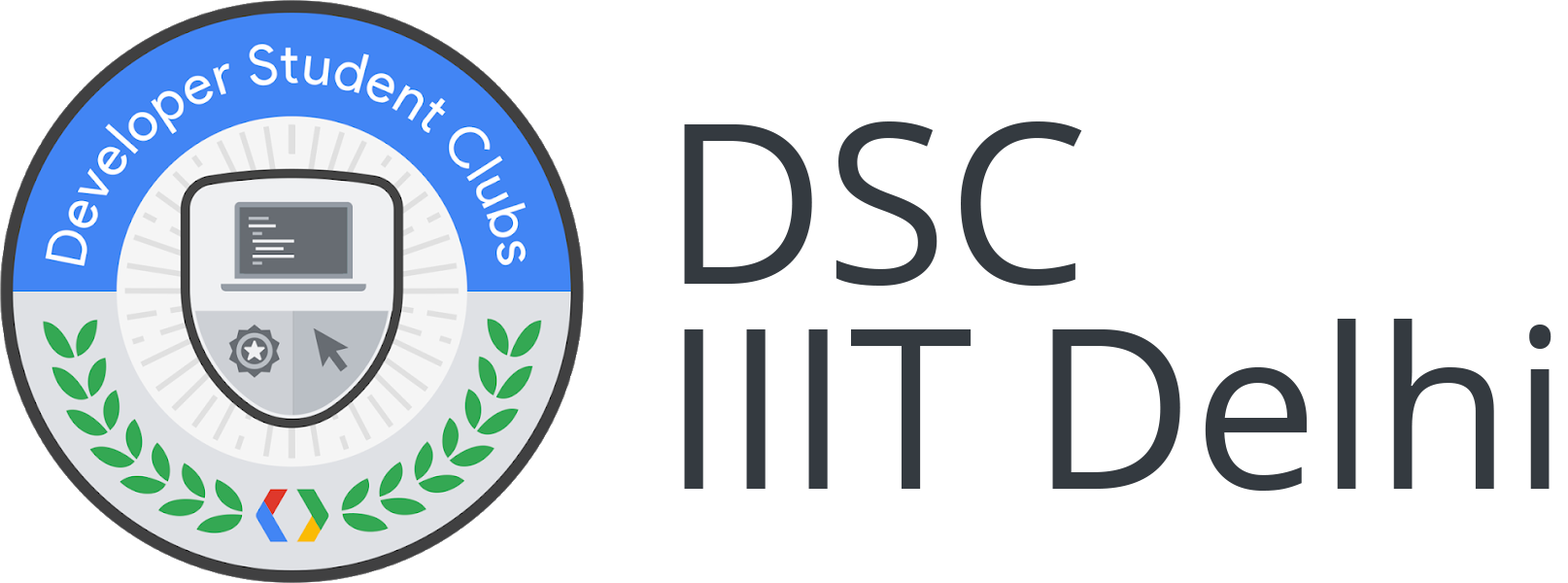
<style>
.page{position:relative;width:1568px;height:583px;background:#ffffff}
.page>*{position:absolute;margin:0}
.t1{font:223.5px/204.5px "OpenSans-Regular";color:#343a40}
</style>
<div class="page">
<p class="t1" style="left:684px;top:121px;width:867px;height:370px;text-align:right">DSC<br>IIIT Delhi</p>
</div>
